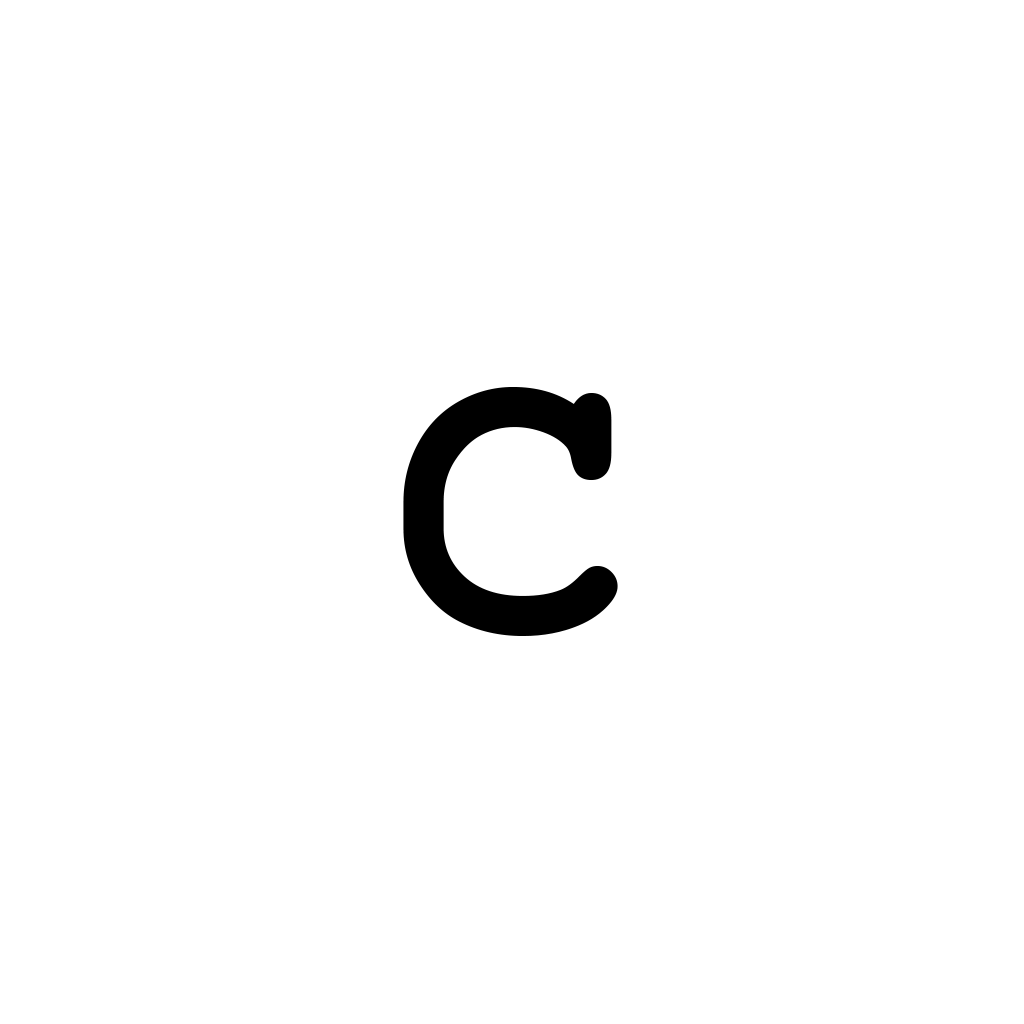
<style>
.page{position:relative;width:1024px;height:1024px;background:#ffffff}
.page>*{position:absolute;margin:0}
.t1{font:400px "CourierNewPS-BoldMT";color:#000000}
</style>
<div class="page">
<p class="t1" style="left:403px;top:387px;width:215px;height:249px">C</p>
</div>
